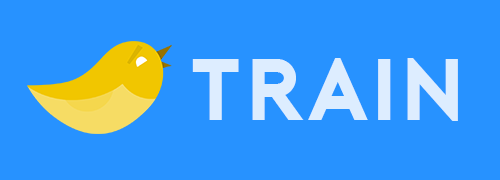
<style>
.page{position:relative;width:500px;height:180px;background:#2792ff}
.page>*{position:absolute;margin:0}
.t1{font:87.2px "Porter-BoldDEMO";color:#ddedff}
</style>
<div class="page">
<p class="t1" style="left:192px;top:58px;width:266px;height:63px">TRAIN</p>
</div>
